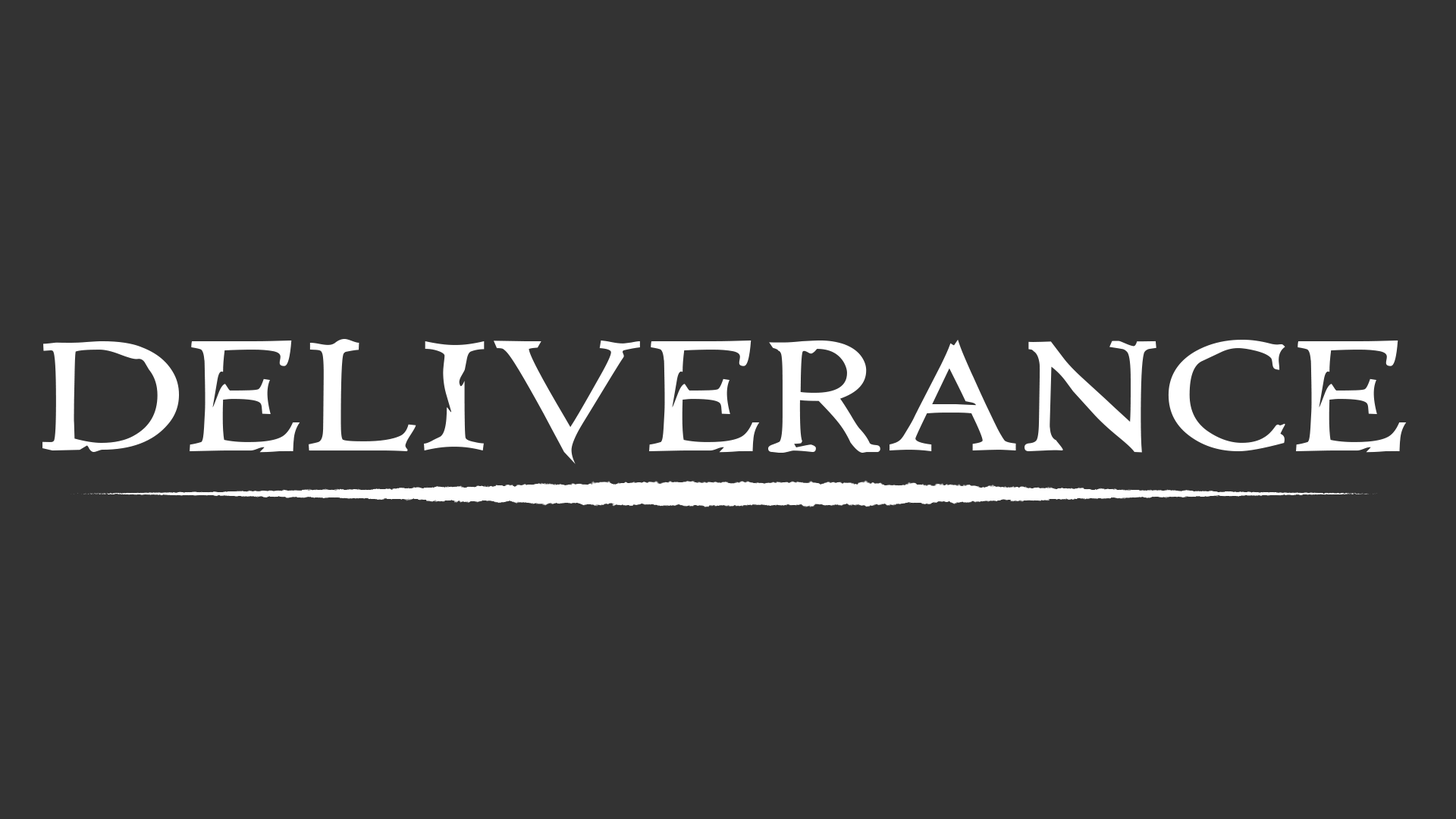
<style>
.page{position:relative;width:1456px;height:819px;background:#333333}
.page>*{position:absolute;margin:0}
.t1{font:157.4px "Immortal";letter-spacing:0.05em;color:#ffffff}
</style>
<div class="page">
<p class="t1" style="left:42px;top:339px;width:1365px;height:125px">DELIVERANCE</p>
</div>
